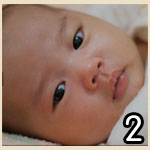
<style>
.page{position:relative;width:150px;height:150px}
.page>*{position:absolute;margin:0}
.t1{font:36px "FZY3JW--GB1-0";letter-spacing:0.2em;color:#ffffff}
</style>
<div class="page">
<p class="t1" style="left:125px;top:115px;width:17px;height:26px">2</p>
</div>
